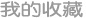
<style>
.page{position:relative;width:86px;height:18px;background:#ffffff}
.page>*{position:absolute;margin:0}
.t1{font:17px "FZY3K--GBK1-0";color:#999999;scale:1.22 1}
</style>
<div class="page">
<p class="t1" style="left:0px;top:1px;width:83px;height:17px">我的收藏</p>
</div>
